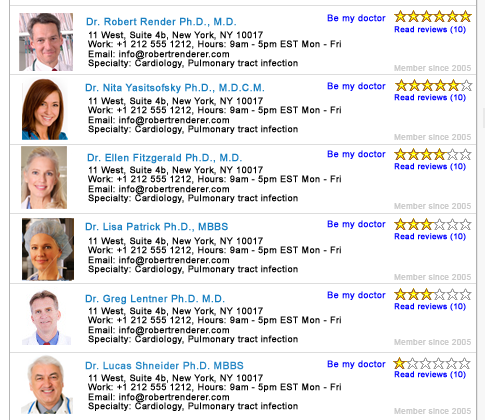
<style>
.page{position:relative;width:485px;height:420px;background:#ffffff}
.page>*{position:absolute;margin:0}
.t1{font:10px "ArialMT";letter-spacing:0.025em;color:#1b81c2;font-weight:bold}
.t2{font:9px "ArialMT";letter-spacing:0.025em;color:#0000ff;font-weight:bold}
.t3{font:8px "ArialMT";letter-spacing:0.025em;color:#0000ff;font-weight:bold}
.t4{font:9px/9.3px "ArialMT";letter-spacing:0.025em;color:#000000;font-weight:bold}
.t5{font:8px "ArialMT";letter-spacing:0.025em;color:#cccccc;font-weight:bold}
.t6{font:10px "ArialMT";letter-spacing:0.025em;color:#2a89c6;font-weight:bold}
</style>
<div class="page">
<p class="t1" style="left:86px;top:17px;width:150px;height:10px">Dr. Robert Render Ph.D., M.D.</p>
<p class="t2" style="left:327px;top:14px;width:59px;height:9px">Be my doctor</p>
<p class="t3" style="left:394px;top:26px;width:72px;height:8px">Read reviews (10)</p>
<p class="t4" style="left:88px;top:31px;width:253px;height:37px">11 West, Suite 4b, New York, NY 10017<br>Work: +1 212 555 1212, Hours: 9am - 5pm EST Mon - Fri<br>Email: info@robertrenderer.com<br>Specialty: Cardiology, Pulmonary tract infection</p>
<p class="t5" style="left:394px;top:65px;width:77px;height:6px">Member since 2005</p>
<p class="t1" style="left:85px;top:83px;width:179px;height:11px">Dr. Nita Yasitsofsky Ph.D., M.D.C.M.</p>
<p class="t2" style="left:327px;top:82px;width:59px;height:9px">Be my doctor</p>
<p class="t4" style="left:88px;top:97px;width:253px;height:37px">11 West, Suite 4b, New York, NY 10017<br>Work: +1 212 555 1212, Hours: 9am - 5pm EST Mon - Fri<br>Email: info@robertrenderer.com<br>Specialty: Cardiology, Pulmonary tract infection</p>
<p class="t3" style="left:394px;top:94px;width:72px;height:8px">Read reviews (10)</p>
<p class="t5" style="left:394px;top:134px;width:77px;height:6px">Member since 2005</p>
<p class="t2" style="left:327px;top:150px;width:59px;height:9px">Be my doctor</p>
<p class="t1" style="left:87px;top:153px;width:155px;height:11px">Dr. Ellen Fitzgerald Ph.D., M.D.</p>
<p class="t4" style="left:88px;top:166px;width:253px;height:37px">11 West, Suite 4b, New York, NY 10017<br>Work: +1 212 555 1212, Hours: 9am - 5pm EST Mon - Fri<br>Email: info@robertrenderer.com<br>Specialty: Cardiology, Pulmonary tract infection</p>
<p class="t3" style="left:394px;top:163px;width:72px;height:8px">Read reviews (10)</p>
<p class="t5" style="left:394px;top:203px;width:77px;height:6px">Member since 2005</p>
<p class="t1" style="left:85px;top:222px;width:143px;height:10px">Dr. Lisa Patrick Ph.D., MBBS</p>
<p class="t2" style="left:327px;top:220px;width:59px;height:9px">Be my doctor</p>
<p class="t3" style="left:394px;top:233px;width:72px;height:8px">Read reviews (10)</p>
<p class="t4" style="left:88px;top:237px;width:253px;height:37px">11 West, Suite 4b, New York, NY 10017<br>Work: +1 212 555 1212, Hours: 9am - 5pm EST Mon - Fri<br>Email: info@robertrenderer.com<br>Specialty: Cardiology, Pulmonary tract infection</p>
<p class="t5" style="left:394px;top:274px;width:77px;height:6px">Member since 2005</p>
<p class="t1" style="left:85px;top:294px;width:140px;height:11px">Dr. Greg Lentner Ph.D. M.D.</p>
<p class="t2" style="left:327px;top:291px;width:59px;height:9px">Be my doctor</p>
<p class="t3" style="left:394px;top:303px;width:72px;height:8px">Read reviews (10)</p>
<p class="t4" style="left:88px;top:307px;width:253px;height:37px">11 West, Suite 4b, New York, NY 10017<br>Work: +1 212 555 1212, Hours: 9am - 5pm EST Mon - Fri<br>Email: info@robertrenderer.com<br>Specialty: Cardiology, Pulmonary tract infection</p>
<p class="t5" style="left:394px;top:339px;width:77px;height:6px">Member since 2005</p>
<p class="t6" style="left:85px;top:361px;width:159px;height:9px">Dr. Lucas Shneider Ph.D. MBBS</p>
<p class="t2" style="left:327px;top:360px;width:59px;height:9px">Be my doctor</p>
<p class="t4" style="left:88px;top:374px;width:253px;height:37px">11 West, Suite 4b, New York, NY 10017<br>Work: +1 212 555 1212, Hours: 9am - 5pm EST Mon - Fri<br>Email: info@robertrenderer.com<br>Specialty: Cardiology, Pulmonary tract infection</p>
<p class="t3" style="left:394px;top:371px;width:72px;height:8px">Read reviews (10)</p>
<p class="t5" style="left:394px;top:408px;width:77px;height:6px">Member since 2005</p>
</div>
